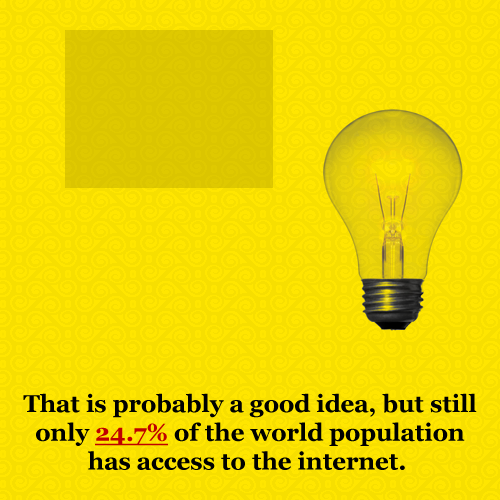
<style>
.page{position:relative;width:500px;height:500px;background:#f7df00}
.page>*{position:absolute;margin:0}
.t1{font:24px "Georgia-Bold";color:#000100}
.t2{font:24px "Georgia-Bold";color:#bf0000;text-decoration:underline}
</style>
<div class="page">
<p class="t1" style="left:23px;top:393px;width:454px;height:77px;text-align:center">That is probably a good idea, but still<br>only <span class="t2">24.7%</span> of the world population<br>has access to the internet.</p>
</div>
